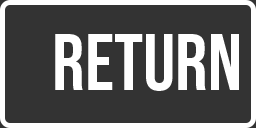
<style>
.page{position:relative;width:256px;height:128px;background:#333333}
.page>*{position:absolute;margin:0}
.t1{font:80.4px "BebasNeuePro-Bold";color:#ffffff}
</style>
<div class="page">
<p class="t1" style="left:55px;top:34px;width:184px;height:57px">RETURN</p>
</div>
